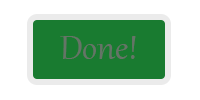
<style>
.page{position:relative;width:200px;height:100px;background:#ffffff}
.page>*{position:absolute;margin:0}
.t1{font:41.7px "Gabriola";color:#657467}
</style>
<div class="page">
<p class="t1" style="left:60px;top:36px;width:76px;height:23px">Done!</p>
</div>
